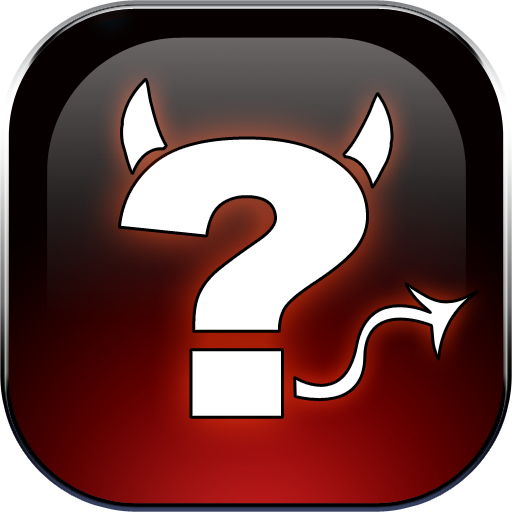
<style>
.page{position:relative;width:512px;height:512px;background:#ffffff}
.page>*{position:absolute;margin:0}
.t1{font:383.2px "Arial-Black";color:#ffffff;scale:1.2 1}
</style>
<div class="page">
<p class="t1" style="left:119px;top:138px;width:249px;height:280px">?</p>
</div>
